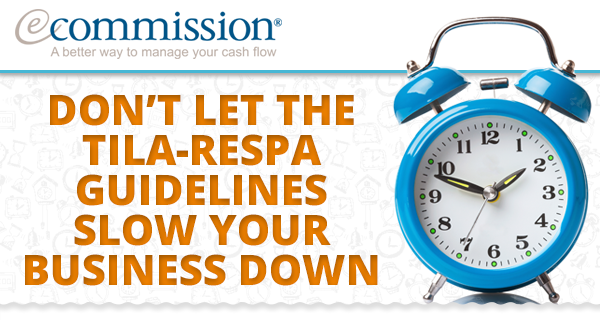
<style>
.page{position:relative;width:600px;height:320px;background:#ffffff}
.page>*{position:absolute;margin:0}
.t1{font:42px/40px "OpenSans-Extrabold";color:#d77400;text-transform:uppercase}
</style>
<div class="page">
<p class="t1" style="left:25px;top:94px;width:353px;height:192px;text-align:center">Don’t let the TILA-RESPA guidelines slow your business down</p>
</div>
